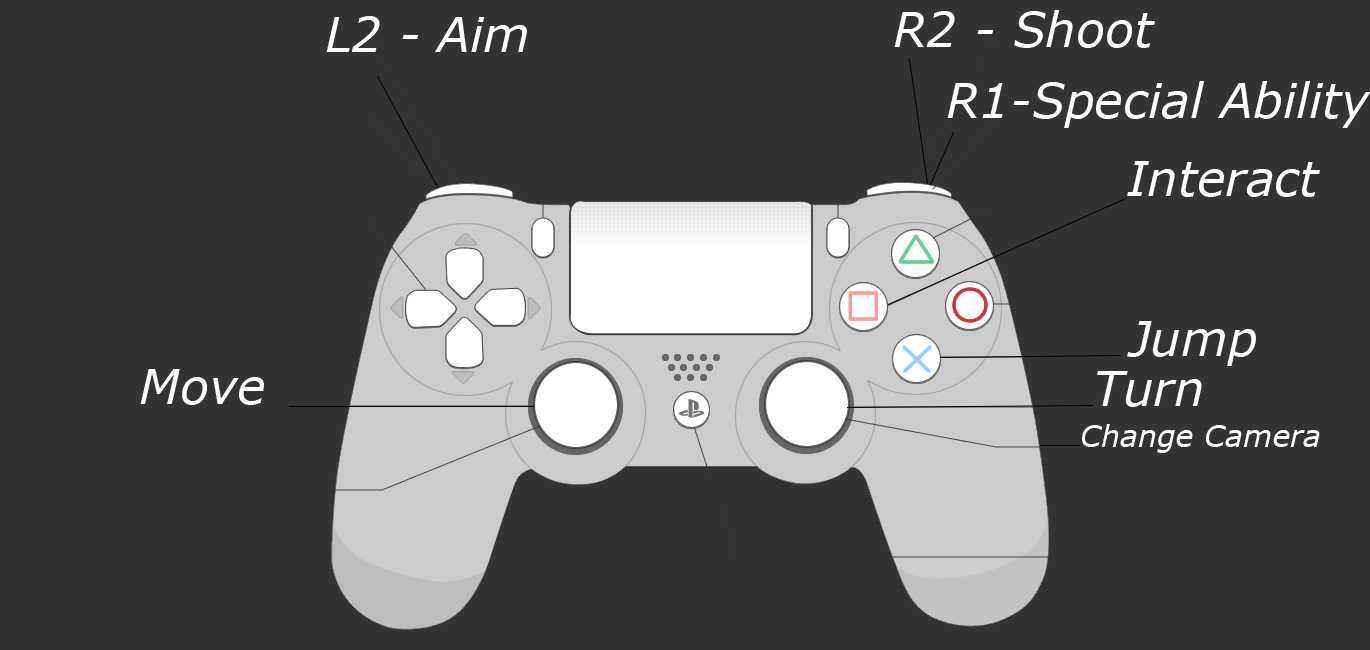
<style>
.page{position:relative;width:1370px;height:650px;background:#333333}
.page>*{position:absolute;margin:0}
.t1{font:48px "Verdana-Italic";color:#ffffff}
.t2{font:48px "Verdana-Italic";color:#fefefe}
.t3{font:30px "Verdana-Italic";color:#ffffff}
</style>
<div class="page">
<p class="t1" style="left:326px;top:16px;width:201px;height:36px">L2 - Aim</p>
<p class="t2" style="left:894px;top:10px;width:261px;height:38px">R2 - Shoot</p>
<p class="t1" style="left:947px;top:81px;width:424px;height:47px">R1-Special Ability</p>
<p class="t1" style="left:1127px;top:161px;width:193px;height:36px">Interact</p>
<p class="t2" style="left:1127px;top:321px;width:129px;height:45px">Jump</p>
<p class="t1" style="left:140px;top:369px;width:124px;height:36px">Move</p>
<p class="t1" style="left:1097px;top:371px;width:105px;height:36px">Turn</p>
<p class="t3" style="left:1082px;top:424px;width:238px;height:29px">Change Camera</p>
</div>
